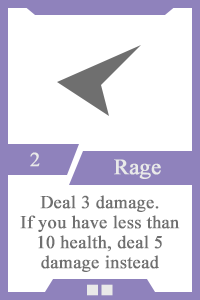
<style>
.page{position:relative;width:200px;height:300px;background:#ffffff}
.page>*{position:absolute;margin:0}
.t1{font:20px "TimesNewRomanPSMT";color:#e9e9e9;font-weight:bold}
.t2{font:22px "TimesNewRomanPSMT";color:#e9e9e9;font-weight:bold}
.t3{font:18px/20px "TimesNewRomanPSMT";color:#6f6f6f;font-weight:bold}
.t4{font:14px "AdobeHeitiStd-Regular";color:#e9e9e9;font-weight:bold}
</style>
<div class="page">
<p class="t1" style="left:30px;top:152px;width:10px;height:15px">2</p>
<p class="t2" style="left:114px;top:159px;width:47px;height:20px">Rage</p>
<p class="t3" style="left:20px;top:195px;width:160px;height:77px;text-align:center">Deal 3 damage.<br>If you have less than 10 health, deal 5 damage instead</p>
<p class="t4" style="left:87px;top:284px;width:26px;height:12px">■■</p>
</div>
